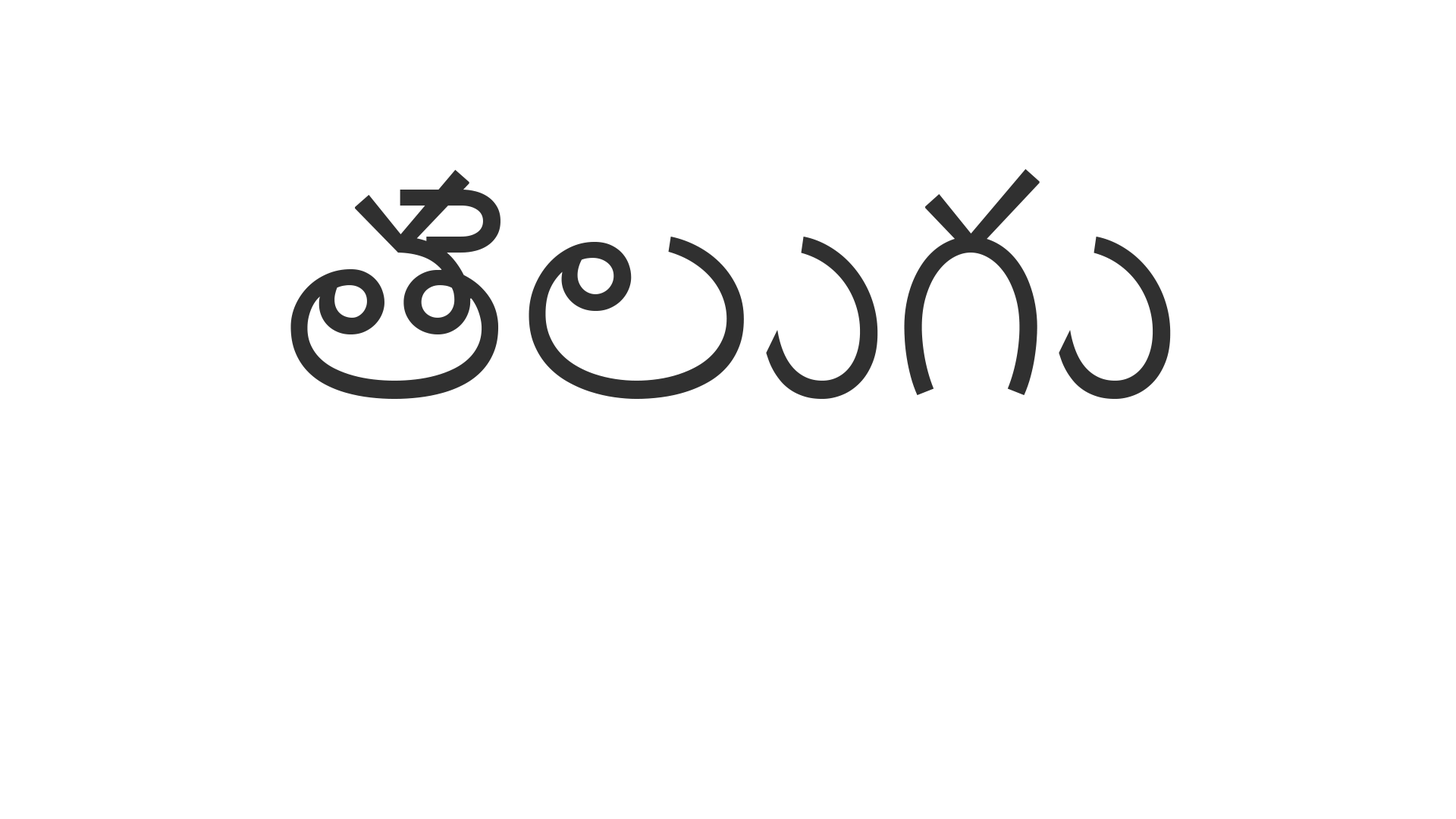
<style>
.page{position:relative;width:1456px;height:819px;background:#ffffff}
.page>*{position:absolute;margin:0}
.t1{font:265.4px "NirmalaUI";color:#303030}
</style>
<div class="page">
<p class="t1" style="left:290px;top:169px;width:881px;height:230px">తెలుగు</p>
</div>
